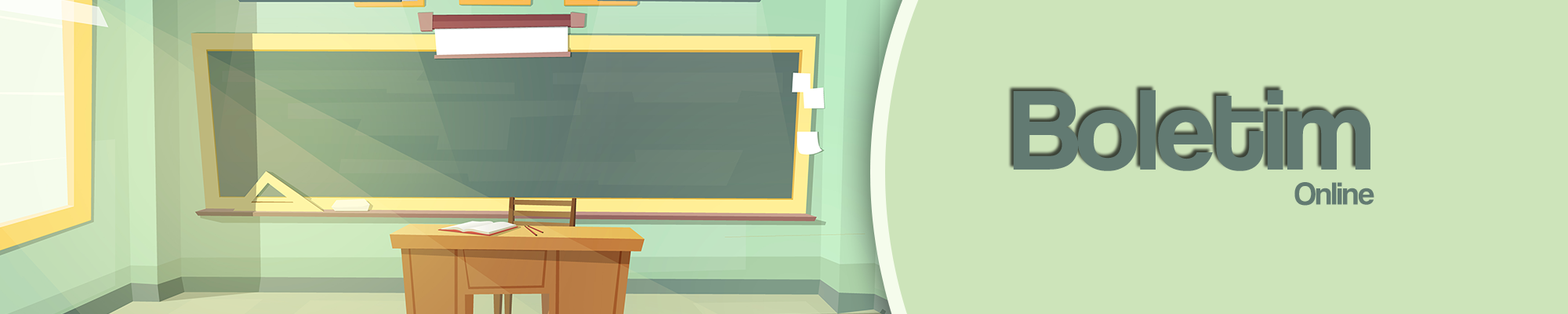
<style>
.page{position:relative;width:1568px;height:314px;background:#cde4ba}
.page>*{position:absolute;margin:0}
.t1{font:117.6px "CoolveticaRg-Regular";letter-spacing:-0.02em;color:#617a72}
.t2{font:32.7px "CoolveticaRg-Regular";letter-spacing:-0.02em;color:#617a72}
</style>
<div class="page">
<p class="t1" style="left:1013px;top:89px;width:357px;height:82px">Boletim</p>
<p class="t2" style="left:1294px;top:182px;width:80px;height:23px">Online</p>
</div>
